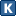
<style>
.page{position:relative;width:16px;height:16px;background:#336699}
.page>*{position:absolute;margin:0}
.t1{font:13px "Tahoma-Bold";color:#ffffff}
</style>
<div class="page">
<p class="t1" style="left:4px;top:3px;width:9px;height:10px">K</p>
</div>
